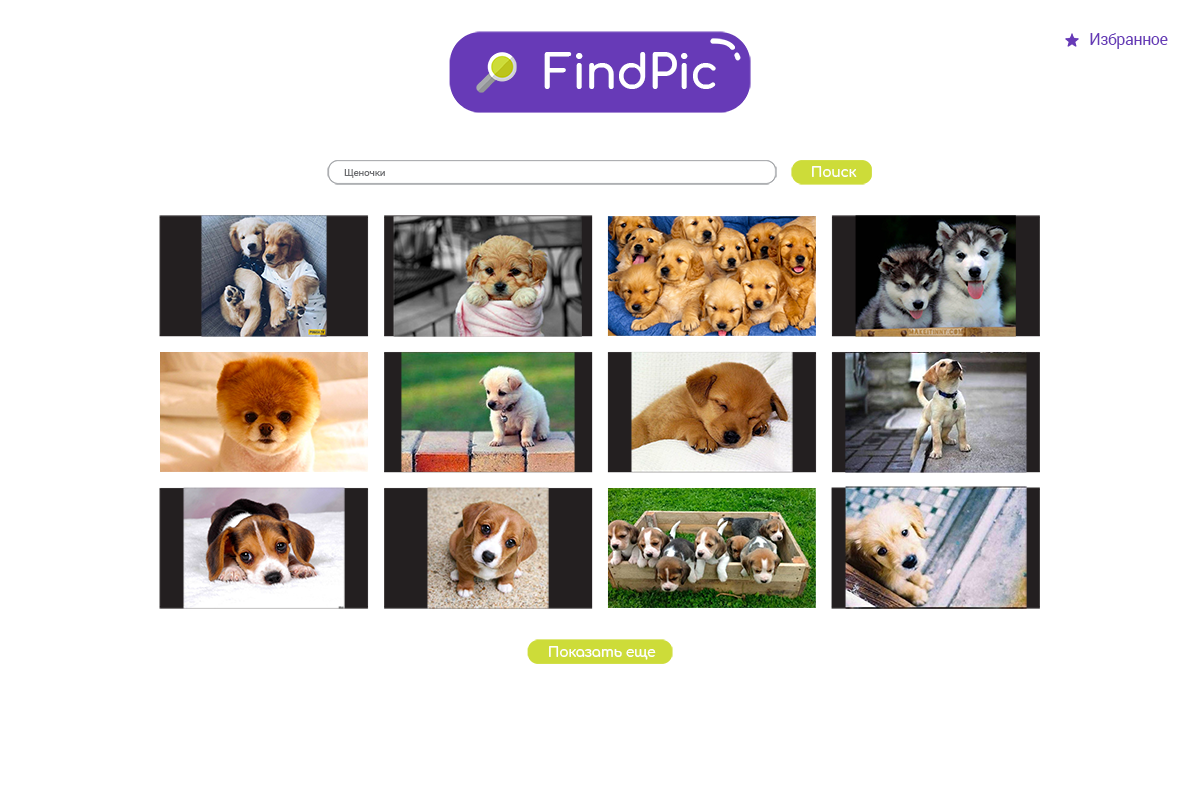
<style>
.page{position:relative;width:1200px;height:800px;background:#ffffff}
.page>*{position:absolute;margin:0}
.t1{font:16px "Roboto-Regular";letter-spacing:-0.025em;color:#673ab7}
.t2{font:10px "Roboto-Regular";letter-spacing:-0.025em;color:#6d6e71}
.t3{font:14px "Comfortaa-Bold";letter-spacing:-0.025em;color:#ffffff}
</style>
<div class="page">
<p class="t1" style="left:1090px;top:33px;width:78px;height:16px">Избранное</p>
<p class="t2" style="left:344px;top:169px;width:41px;height:9px">Щеночки</p>
<p class="t3" style="left:812px;top:166px;width:45px;height:11px">Поиск</p>
<p class="t3" style="left:549px;top:646px;width:107px;height:14px">Показать еще</p>
</div>
